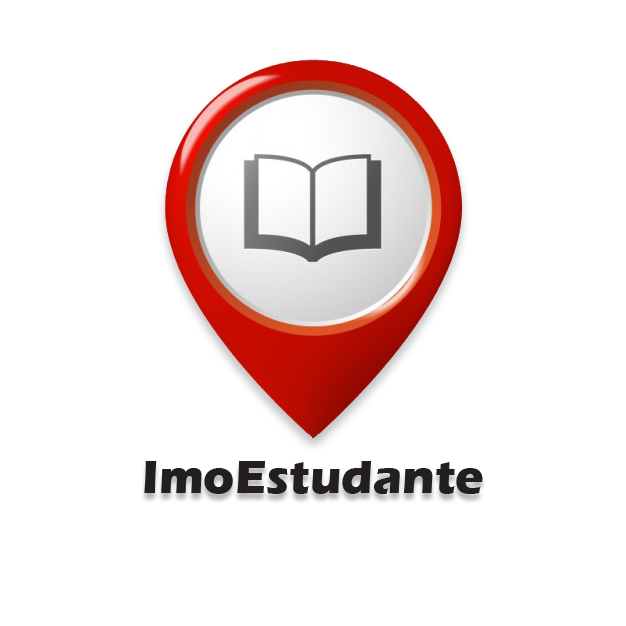
<style>
.page{position:relative;width:626px;height:626px;background:#ffffff}
.page>*{position:absolute;margin:0}
.t1{font:48px "ErasITC-Bold";color:#231f20}
</style>
<div class="page">
<p class="t1" style="left:144px;top:461px;width:339px;height:33px">ImoEstudante</p>
</div>
